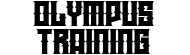
<style>
.page{position:relative;width:190px;height:55px;background:#ffffff}
.page>*{position:absolute;margin:0}
.t1{font:25px "HYogaFlame-Regular";color:#000000}
</style>
<div class="page">
<p class="t1" style="left:33px;top:1px;width:121px;height:25px">Olympus</p>
<p class="t1" style="left:36px;top:29px;width:114px;height:25px">Training</p>
</div>
